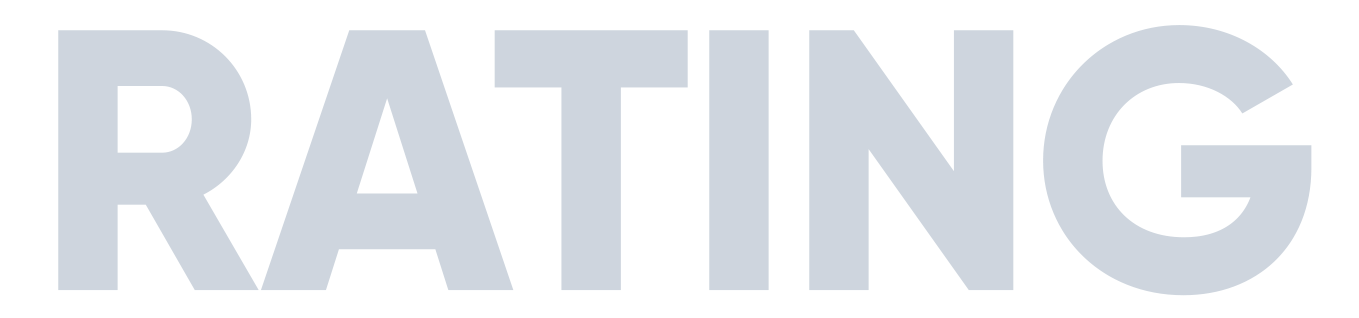
<style>
.page{position:relative;width:1359px;height:318px;background:#ffffff}
.page>*{position:absolute;margin:0}
.t1{font:371px "Gilroy-ExtraBold";letter-spacing:-0.01em;color:#ced5de}
</style>
<div class="page">
<p class="t1" style="left:58px;top:25px;width:1254px;height:271px">RATING</p>
</div>
